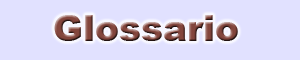
<style>
.page{position:relative;width:300px;height:60px;background:#e1e1ff}
.page>*{position:absolute;margin:0}
.t1{font:36px "Arial-Black"}
</style>
<div class="page">
<p class="t1" style="left:54px;top:15px;width:184px;height:26px">Glossario</p>
</div>
